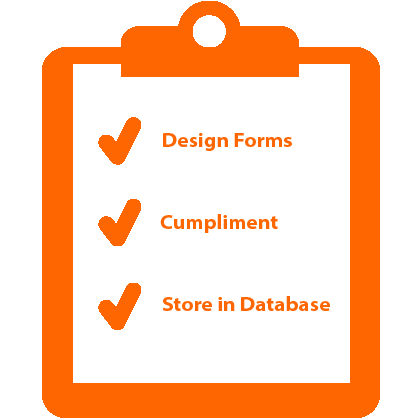
<style>
.page{position:relative;width:420px;height:420px;background:#ffffff}
.page>*{position:absolute;margin:0}
.t1{font:20px "MyriadPro-BoldSemiExt";color:#fd6600}
</style>
<div class="page">
<p class="t1" style="left:163px;top:133px;width:129px;height:18px">Design Forms</p>
<p class="t1" style="left:160px;top:214px;width:118px;height:19px">Cumpliment</p>
<p class="t1" style="left:162px;top:296px;width:168px;height:15px">Store in Database</p>
</div>
